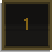
<style>
.page{position:relative;width:52px;height:52px;background:#121110}
.page>*{position:absolute;margin:0}
.t1{font:24px "Terminal";letter-spacing:0.01em;color:#826216}
</style>
<div class="page">
<p class="t1" style="left:24px;top:18px;width:4px;height:12px">1</p>
</div>
